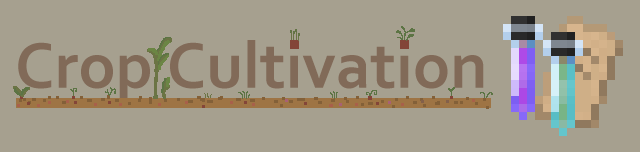
<style>
.page{position:relative;width:640px;height:152px;background:#a6a08f}
.page>*{position:absolute;margin:0}
.t1{font:67.6px "Corbel-Bold";color:#816a58}
</style>
<div class="page">
<p class="t1" style="left:18px;top:40px;width:466px;height:63px">Crop Cultivation</p>
</div>
